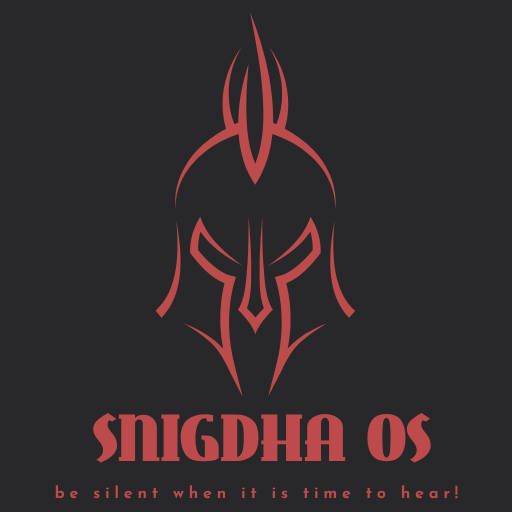
<style>
.page{position:relative;width:512px;height:512px;background:#28282b}
.page>*{position:absolute;margin:0}
.t1{font:64.3px "EastMarket";color:#bd4b4b}
.t2{font:16px "JosefinSans-Bold";letter-spacing:0.3em;color:#bd4b4b}
</style>
<div class="page">
<p class="t1" style="left:93px;top:413px;width:338px;height:50px">SNIGDHA OS</p>
<p class="t2" style="left:55px;top:485px;width:403px;height:14px">be silent when it is time to hear!</p>
</div>
